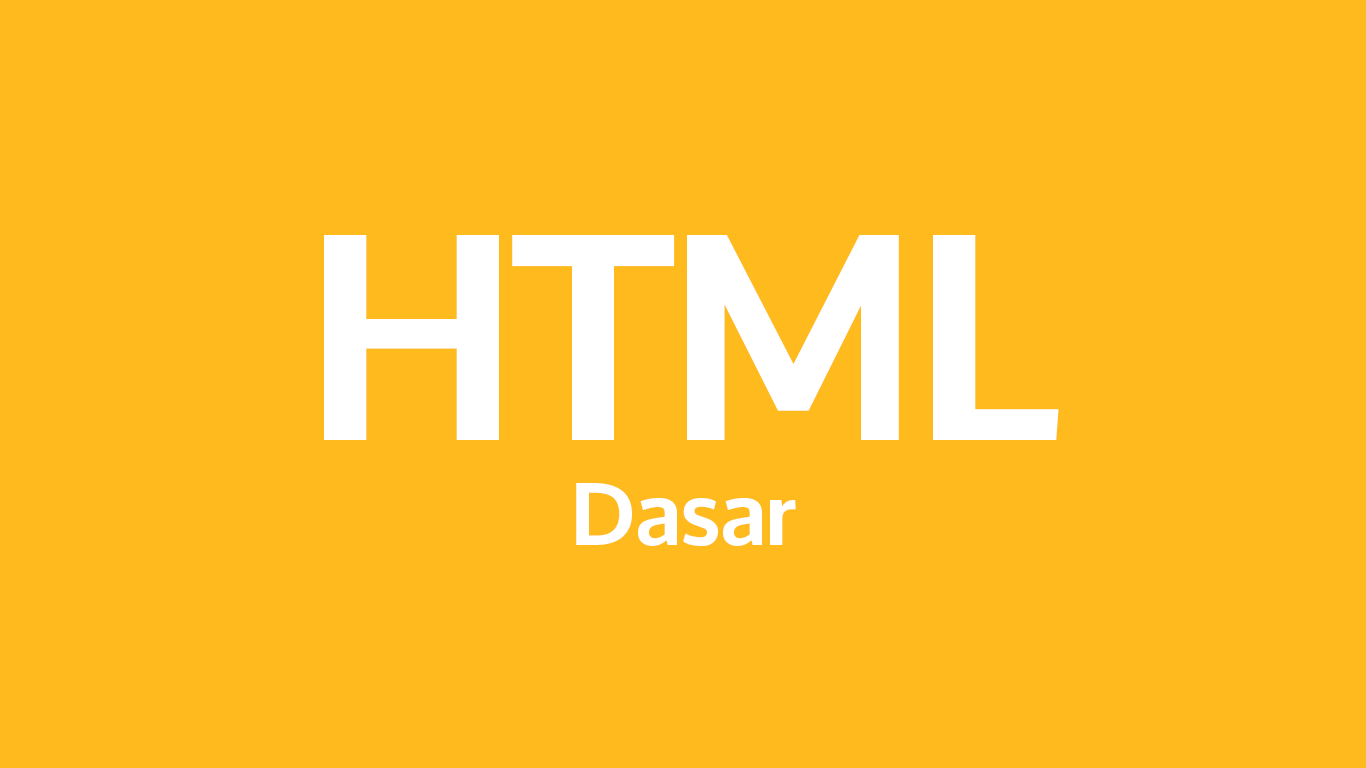
<style>
.page{position:relative;width:1366px;height:768px;background:#ffbb1e}
.page>*{position:absolute;margin:0}
.t1{font:88px "Oxygen-Bold";color:#ffffff}
.t2{font:290px "Oxygen-Bold";color:#ffffff}
</style>
<div class="page">
<p class="t1" style="left:324px;top:235px;width:735px;height:311px;text-align:center"><span class="t2">HTML<br></span>Dasar</p>
</div>
